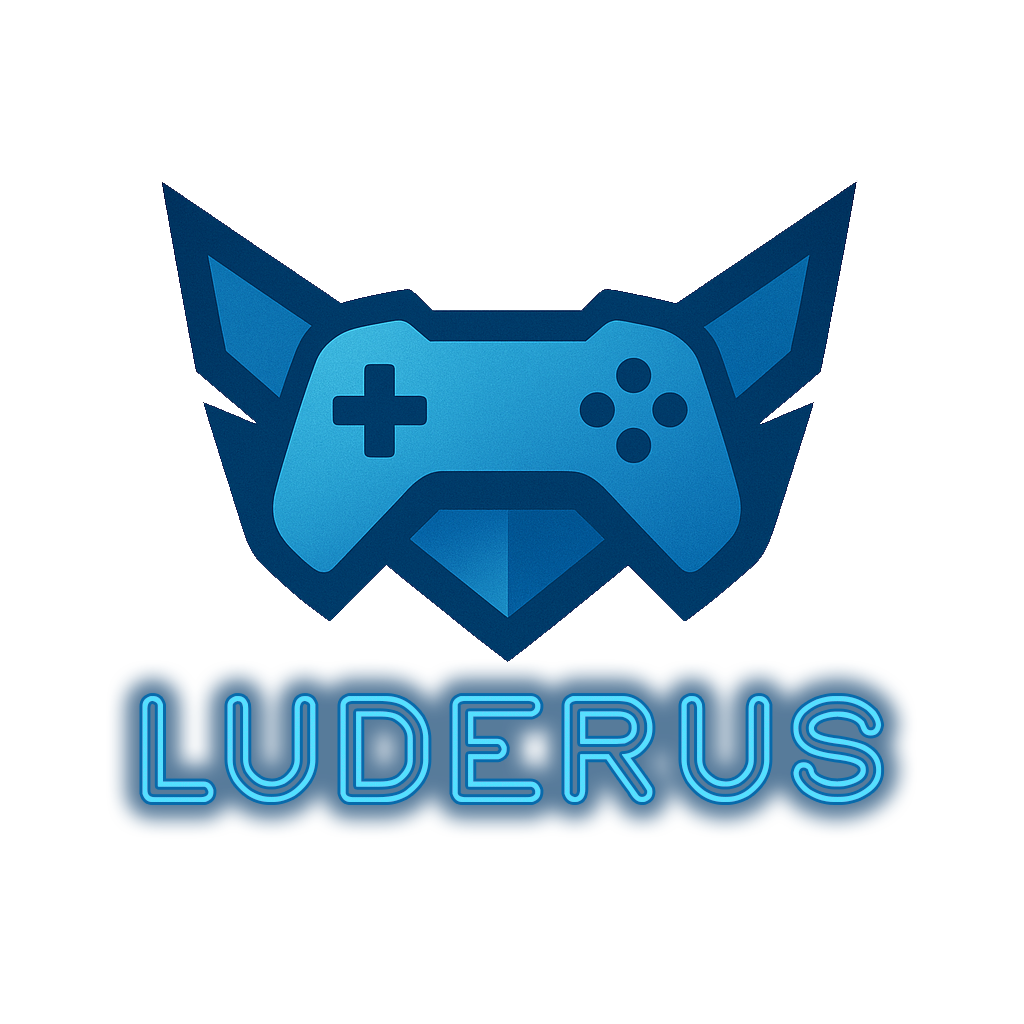
<style>
.page{position:relative;width:1024px;height:1024px;background:#ffffff}
.page>*{position:absolute;margin:0}
.t1{font:145px "NEONGLOW";letter-spacing:0.15em;color:#51e1ff}
</style>
<div class="page">
<p class="t1" style="left:142px;top:696px;width:740px;height:106px">LUDERUS</p>
</div>
